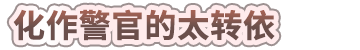
<style>
.page{position:relative;width:360px;height:50px;background:#ffffff}
.page>*{position:absolute;margin:0}
.t1{font:32px "SourceHanSansSC-Bold";color:#73534d;font-weight:bold}
</style>
<div class="page">
<p class="t1" style="left:13px;top:9px;width:262px;height:32px">化作警官的太转依</p>
</div>
